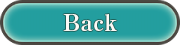
<style>
.page{position:relative;width:180px;height:45px;background:#239e9f}
.page>*{position:absolute;margin:0}
.t1{font:23px "RyuminPro-ExBold";color:#ffffff}
</style>
<div class="page">
<p class="t1" style="left:63px;top:14px;width:54px;height:17px">Back</p>
</div>
